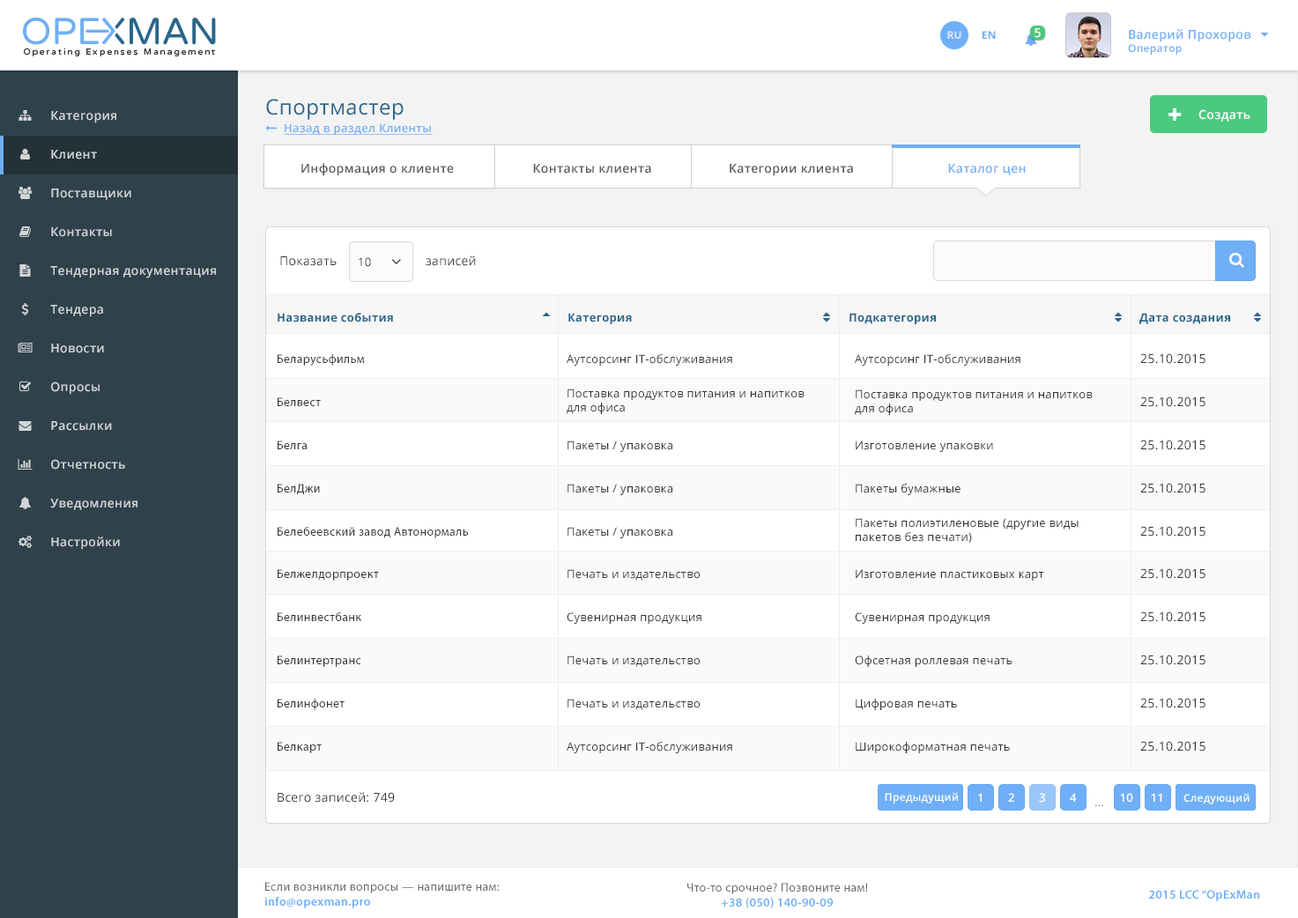
<style>
.page{position:relative;width:1298px;height:918px;background:#ffffff}
.page>*{position:absolute;margin:0}
.t1{font:12.3px "OpenSans-Semibold";letter-spacing:0.025em;color:#ffffff}
.t2{font:12.3px "OpenSans-Semibold";letter-spacing:0.025em;color:#6eaef7}
.t3{font:10.5px "OpenSans-Semibold";letter-spacing:0.025em;color:#6eaef7}
.t4{font:10.6px "OpenSans-Bold";letter-spacing:0.025em;color:#dbe9fd;text-transform:uppercase}
.t5{font:10.6px "OpenSans-Bold";letter-spacing:0.025em;color:#6faff8;text-transform:uppercase}
.t6{font:21.1px "OpenSans";letter-spacing:0.025em;color:#29658b}
.t7{font:12.3px "OpenSans-Semibold";letter-spacing:0.025em;color:#d2d5d7}
.t8{font:11.4px "OpenSans-Semibold";letter-spacing:0.025em;color:#6faff8;text-decoration:underline}
.t9{font:12.3px "OpenSans-Semibold";letter-spacing:0.025em;color:#5a5a5a}
.t10{font:12.3px "OpenSans-Semibold";letter-spacing:0.025em;color:#6faff8}
.t11{font:12.3px "OpenSans";letter-spacing:0.025em;color:#333333}
.t12{font:11.4px "OpenSans";letter-spacing:0.025em;color:#333333}
.t13{font:11.4px "OpenSans-Bold";letter-spacing:0.025em;color:#29668b}
.t14{font:12.3px "MyriadPro-Regular";letter-spacing:0.025em;color:#333333}
.t15{font:10.5px "OpenSans-Semibold";letter-spacing:0.025em;color:#ffffff}
.t16{font:11.4px "OpenSans-Semibold";letter-spacing:0.025em;color:#ffffff}
.t17{font:11.4px "OpenSans";letter-spacing:0.025em;color:#999999}
.t18{font:12.3px "MyriadPro-Regular";letter-spacing:0.025em;color:#696969}
.t19{font:12.3px "MyriadPro-Semibold";letter-spacing:0.025em;color:#6eaef8}
</style>
<div class="page">
<p class="t1" style="left:1035px;top:28px;width:6px;height:10px">5</p>
<p class="t2" style="left:1128px;top:29px;width:124px;height:26px">Валерий Прохоров<br><span class="t3">Оператор</span></p>
<p class="t4" style="left:948px;top:31px;width:14px;height:8px">Ru</p>
<p class="t5" style="left:982px;top:31px;width:14px;height:8px">EN</p>
<p class="t6" style="left:266px;top:99px;width:138px;height:21px">Спортмастер</p>
<p class="t7" style="left:51px;top:111px;width:65px;height:12px">Категория</p>
<p class="t1" style="left:1199px;top:109px;width:52px;height:13px">Создать</p>
<p class="t8" style="left:284px;top:123px;width:149px;height:12px">Назад в раздел Клиенты</p>
<p class="t7" style="left:51px;top:150px;width:46px;height:10px">Клиент</p>
<p class="t9" style="left:301px;top:163px;width:153px;height:13px">Информация о клиенте</p>
<p class="t9" style="left:533px;top:164px;width:118px;height:10px">Контакты клиента</p>
<p class="t9" style="left:730px;top:164px;width:123px;height:12px">Категории клиента</p>
<p class="t10" style="left:948px;top:164px;width:78px;height:11px">Каталог цен</p>
<p class="t7" style="left:51px;top:189px;width:80px;height:11px">Поставщики</p>
<p class="t7" style="left:51px;top:227px;width:61px;height:10px">Контакты</p>
<p class="t11" style="left:280px;top:256px;width:57px;height:10px">Показать</p>
<p class="t12" style="left:359px;top:257px;width:12px;height:10px">10</p>
<p class="t11" style="left:426px;top:256px;width:50px;height:10px">записей</p>
<p class="t7" style="left:50px;top:266px;width:166px;height:13px">Тендерная документация</p>
<p class="t7" style="left:50px;top:305px;width:53px;height:12px">Тендера</p>
<p class="t13" style="left:278px;top:313px;width:115px;height:10px">Название события</p>
<p class="t13" style="left:569px;top:313px;width:63px;height:11px">Категория</p>
<p class="t13" style="left:850px;top:313px;width:86px;height:11px">Подкатегория</p>
<p class="t13" style="left:1140px;top:313px;width:90px;height:11px">Дата создания</p>
<p class="t7" style="left:51px;top:344px;width:53px;height:9px">Новости</p>
<p class="t11" style="left:1141px;top:353px;width:65px;height:11px">25.10.2015</p>
<p class="t14" style="left:278px;top:354px;width:86px;height:12px">Беларусьфильм</p>
<p class="t12" style="left:567px;top:354px;width:165px;height:12px">Аутсорсинг IT-обслуживания</p>
<p class="t12" style="left:855px;top:354px;width:166px;height:12px">Аутсорсинг IT-обслуживания</p>
<p class="t7" style="left:51px;top:382px;width:49px;height:13px">Опросы</p>
<p class="t12" style="left:567px;top:389px;width:238px;height:25px">Поставка продуктов питания и напитков <br>для офиса</p>
<p class="t12" style="left:855px;top:390px;width:238px;height:25px">Поставка продуктов питания и напитков <br>для офиса</p>
<p class="t14" style="left:278px;top:398px;width:43px;height:8px">Белвест</p>
<p class="t11" style="left:1141px;top:397px;width:65px;height:10px">25.10.2015</p>
<p class="t7" style="left:51px;top:421px;width:61px;height:10px">Рассылки</p>
<p class="t14" style="left:278px;top:441px;width:29px;height:9px">Белга</p>
<p class="t12" style="left:568px;top:441px;width:105px;height:11px">Пакеты / упаковка</p>
<p class="t12" style="left:856px;top:441px;width:137px;height:11px">Изготовление упаковки</p>
<p class="t11" style="left:1141px;top:440px;width:65px;height:10px">25.10.2015</p>
<p class="t7" style="left:51px;top:459px;width:74px;height:11px">Отчетность</p>
<p class="t14" style="left:278px;top:484px;width:42px;height:11px">БелДжи</p>
<p class="t12" style="left:568px;top:484px;width:105px;height:11px">Пакеты / упаковка</p>
<p class="t12" style="left:856px;top:484px;width:105px;height:11px">Пакеты бумажные</p>
<p class="t11" style="left:1141px;top:483px;width:65px;height:11px">25.10.2015</p>
<p class="t7" style="left:50px;top:499px;width:88px;height:11px">Уведомления</p>
<p class="t12" style="left:856px;top:518px;width:223px;height:25px">Пакеты полиэтиленовые (другие виды <br>пакетов без печати)</p>
<p class="t14" style="left:278px;top:527px;width:191px;height:12px">Белебеевский завод Автонормаль</p>
<p class="t12" style="left:568px;top:527px;width:105px;height:12px">Пакеты / упаковка</p>
<p class="t11" style="left:1141px;top:526px;width:65px;height:11px">25.10.2015</p>
<p class="t7" style="left:51px;top:537px;width:69px;height:13px">Настройки</p>
<p class="t14" style="left:278px;top:569px;width:101px;height:12px">Белжелдорпроект</p>
<p class="t12" style="left:568px;top:569px;width:132px;height:12px">Печать и издательство</p>
<p class="t12" style="left:856px;top:569px;width:188px;height:12px">Изготовление пластиковых карт</p>
<p class="t11" style="left:1141px;top:569px;width:65px;height:10px">25.10.2015</p>
<p class="t14" style="left:278px;top:613px;width:83px;height:8px">Белинвестбанк</p>
<p class="t12" style="left:567px;top:613px;width:135px;height:11px">Сувенирная продукция</p>
<p class="t12" style="left:855px;top:613px;width:135px;height:11px">Сувенирная продукция</p>
<p class="t11" style="left:1141px;top:612px;width:65px;height:10px">25.10.2015</p>
<p class="t14" style="left:278px;top:656px;width:83px;height:11px">Белинтертранс</p>
<p class="t12" style="left:568px;top:656px;width:132px;height:11px">Печать и издательство</p>
<p class="t12" style="left:855px;top:656px;width:158px;height:11px">Офсетная роллевая печать</p>
<p class="t11" style="left:1141px;top:655px;width:65px;height:10px">25.10.2015</p>
<p class="t14" style="left:278px;top:699px;width:67px;height:11px">Белинфонет</p>
<p class="t12" style="left:568px;top:699px;width:132px;height:11px">Печать и издательство</p>
<p class="t12" style="left:856px;top:699px;width:101px;height:11px">Цифровая печать</p>
<p class="t11" style="left:1141px;top:698px;width:65px;height:11px">25.10.2015</p>
<p class="t14" style="left:278px;top:742px;width:44px;height:12px">Белкарт</p>
<p class="t12" style="left:567px;top:742px;width:165px;height:12px">Аутсорсинг IT-обслуживания</p>
<p class="t12" style="left:856px;top:742px;width:154px;height:12px">Широкоформатная печать</p>
<p class="t11" style="left:1141px;top:741px;width:65px;height:11px">25.10.2015</p>
<p class="t11" style="left:278px;top:792px;width:117px;height:11px">Всего записей: 749</p>
<p class="t15" style="left:885px;top:792px;width:73px;height:12px">Предыдущий</p>
<p class="t16" style="left:978px;top:793px;width:4px;height:9px">1</p>
<p class="t16" style="left:1008px;top:793px;width:7px;height:9px">2</p>
<p class="t16" style="left:1039px;top:793px;width:6px;height:10px">3</p>
<p class="t16" style="left:1070px;top:793px;width:7px;height:9px">4</p>
<p class="t16" style="left:1120px;top:793px;width:14px;height:10px">10</p>
<p class="t16" style="left:1151px;top:793px;width:12px;height:9px">11</p>
<p class="t15" style="left:1184px;top:793px;width:66px;height:12px">Следующий</p>
<p class="t17" style="left:1096px;top:805px;width:8px;height:2px">...</p>
<p class="t18" style="left:264px;top:882px;width:236px;height:27px">Если возникли вопросы — напишите нам:<br><span class="t19">info@opexman.pro</span></p>
<p class="t18" style="left:688px;top:883px;width:180px;height:26px;text-align:center">Что-то срочное? Позвоните нам!<br><span class="t19">+38 (050) 140-90-09</span></p>
<p class="t19" style="left:1149px;top:890px;width:111px;height:12px">2015 LCC “OpExMan</p>
</div>
